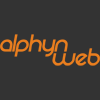
<style>
.page{position:relative;width:100px;height:100px;background:#333333}
.page>*{position:absolute;margin:0}
.t1{font:27.2px "REZ";color:#ea7e1e;font-style:italic}
</style>
<div class="page">
<p class="t1" style="left:0px;top:34px;width:68px;height:23px">alphyn</p>
<p class="t1" style="left:52px;top:48px;width:48px;height:18px">web</p>
</div>
